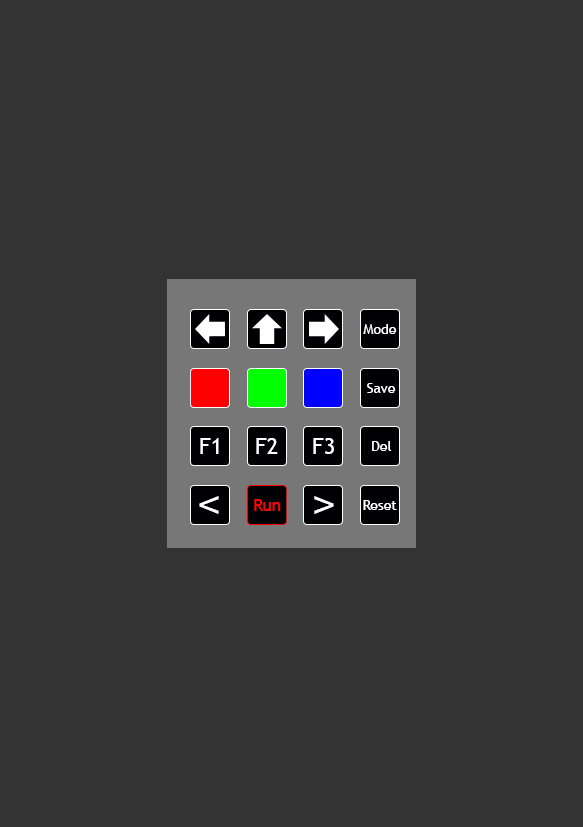
<style>
.page{position:relative;width:583px;height:827px;background:#333333}
.page>*{position:absolute;margin:0}
.t1{font:13.9px "TrebuchetMS";letter-spacing:0.005em;color:#ffffff}
.t2{font:22.2px "TrebuchetMS";letter-spacing:0.005em;color:#ffffff}
.t3{font:33.3px "Helvetica";letter-spacing:0.005em;color:#ffffff}
.t4{font:16.7px "TrebuchetMS";letter-spacing:0.005em;color:#ff0202}
</style>
<div class="page">
<p class="t1" style="left:363px;top:324px;width:34px;height:10px">Mode</p>
<p class="t1" style="left:367px;top:383px;width:29px;height:10px">Save</p>
<p class="t2" style="left:200px;top:438px;width:19px;height:16px">F1</p>
<p class="t2" style="left:256px;top:438px;width:22px;height:16px">F2</p>
<p class="t2" style="left:313px;top:438px;width:21px;height:16px">F3</p>
<p class="t1" style="left:372px;top:441px;width:20px;height:10px">Del</p>
<p class="t3" style="left:199px;top:496px;width:20px;height:18px">&lt;</p>
<p class="t3" style="left:314px;top:496px;width:20px;height:18px">&gt;</p>
<p class="t4" style="left:254px;top:499px;width:27px;height:12px">Run</p>
<p class="t1" style="left:363px;top:500px;width:34px;height:10px">Reset</p>
</div>
